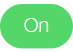
<style>
.page{position:relative;width:73px;height:52px;background:#53d769}
.page>*{position:absolute;margin:0}
.t1{font:20px "HelveticaNeue-Light";color:#ffffff}
</style>
<div class="page">
<p class="t1" style="left:24px;top:18px;width:25px;height:14px">On</p>
</div>
